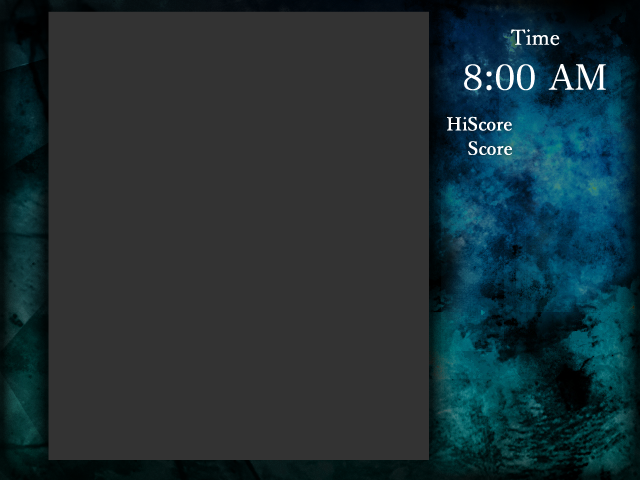
<style>
.page{position:relative;width:640px;height:480px;background:#333333}
.page>*{position:absolute;margin:0}
.t1{font:21px "YuMin-Medium";color:#ffffff}
.t2{font:35px "HiraMinProN-W3";color:#ffffff}
.t3{font:18px "YuMin-Demibold";color:#ffffff}
</style>
<div class="page">
<p class="t1" style="left:511px;top:29px;width:49px;height:17px">Time</p>
<p class="t2" style="left:464px;top:64px;width:142px;height:27px">8:00 AM</p>
<p class="t3" style="left:447px;top:116px;width:65px;height:15px">HiScore</p>
<p class="t3" style="left:468px;top:141px;width:44px;height:14px">Score</p>
</div>
